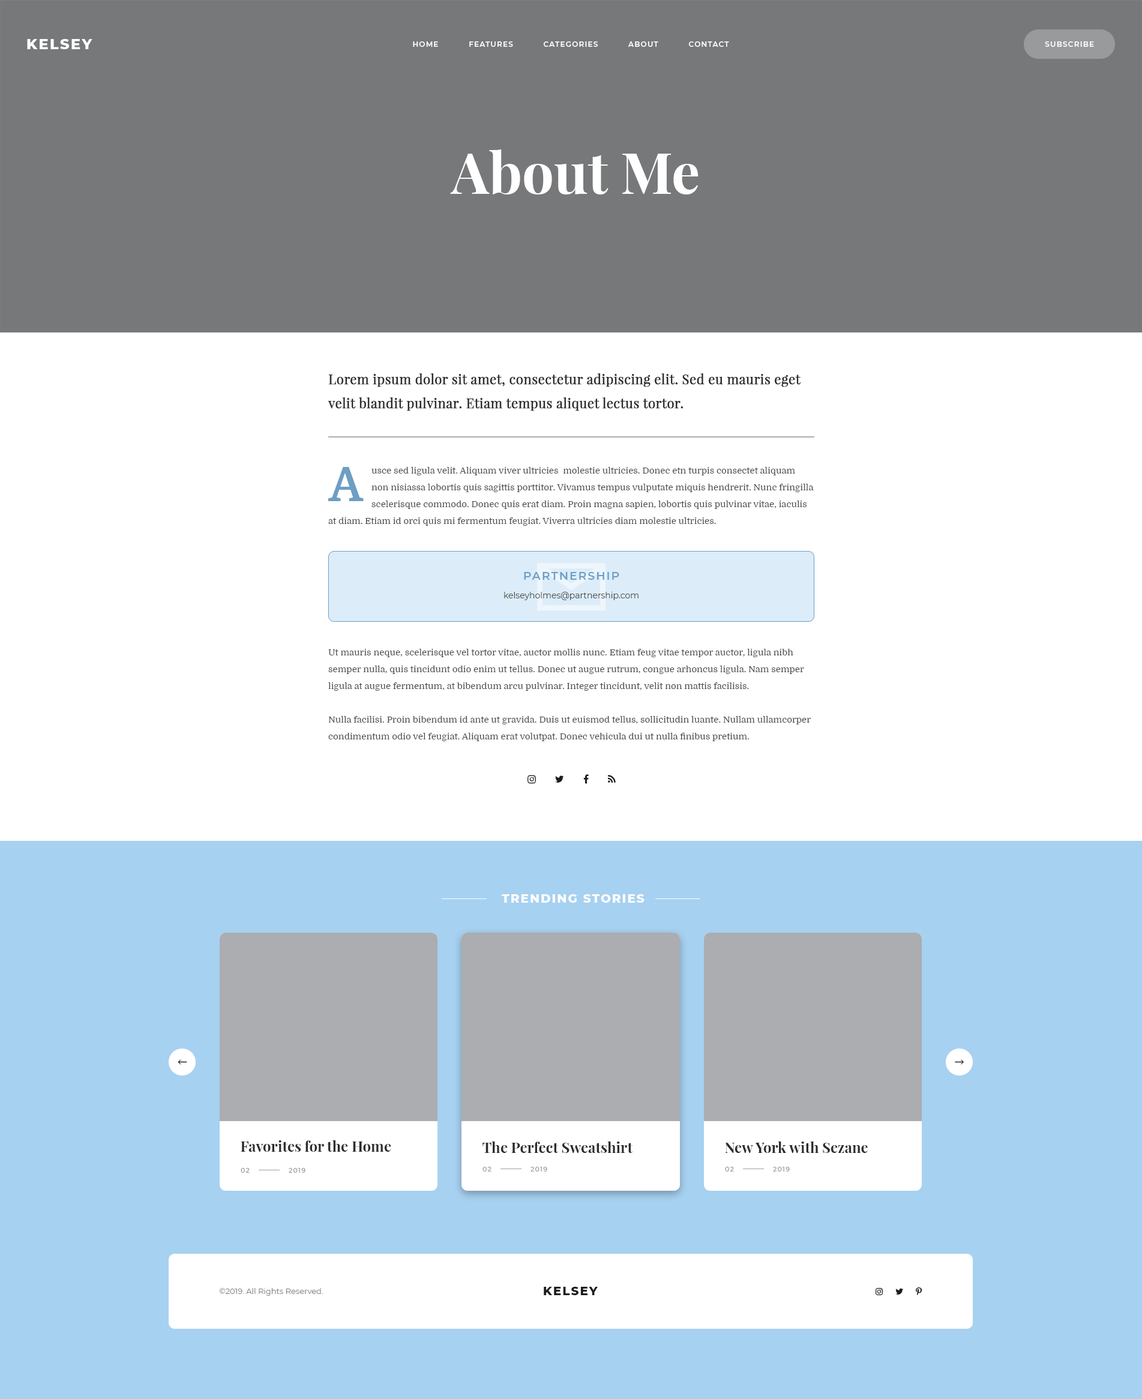
<style>
.page{position:relative;width:1142px;height:1399px;background:#ffffff}
.page>*{position:absolute;margin:0}
.t1{font:14.4px "Montserrat-ExtraBold";letter-spacing:0.1em;color:#ffffff;text-transform:uppercase}
.t2{font:7.2px "Montserrat-SemiBold";letter-spacing:0.1em;color:#ffffff;text-transform:uppercase}
.t3{font:56.4px "PlayfairDisplay-Bold";color:#ffffff}
.t4{font:13.2px/24px "PlayfairDisplay-Regular";color:#2b2d2e;font-weight:bold}
.t5{font:46.8px "Domine-Bold";color:#6d9ec4}
.t6{font:9px/16.8px "Domine-Regular";color:#4a4c4f}
.t7{font:9px "Domine-Regular";color:#4a4c4f}
.t8{font:11.4px "Montserrat-SemiBold";letter-spacing:0.1em;color:#6d9ec4;text-transform:uppercase}
.t9{font:8.4px "Montserrat-Regular";color:#4a4c4f}
.t10{font:12px "Montserrat-ExtraBold";letter-spacing:0.1em;color:#ffffff;text-transform:uppercase}
.t11{font:14.4px "PlayfairDisplay-Bold";color:#2b2d2e}
.t12{font:6.6px "Montserrat-SemiBold";letter-spacing:0.1em;color:#9fa1a4;text-transform:uppercase}
.t13{font:7.8px "Montserrat-Regular";color:#828384}
.t14{font:12px "Montserrat-ExtraBold";letter-spacing:0.1em;color:#1c1d1e;text-transform:uppercase}
</style>
<div class="page">
<p class="t1" style="left:27px;top:39px;width:65px;height:10px">Kelsey</p>
<p class="t2" style="left:413px;top:41px;width:316px;height:6px">Home           Features           Categories           About           Contact</p>
<p class="t2" style="left:1045px;top:41px;width:49px;height:6px">Subscribe</p>
<p class="t3" style="left:450px;top:149px;width:248px;height:45px">About Me</p>
<p class="t4" style="left:328px;top:373px;width:473px;height:38px">Lorem ipsum dolor sit amet, consectetur adipiscing elit. Sed eu mauris eget velit blandit pulvinar. Etiam tempus aliquet lectus tortor.</p>
<p class="t5" style="left:328px;top:467px;width:36px;height:34px">A</p>
<p class="t6" style="left:371px;top:467px;width:443px;height:42px">usce sed ligula velit. Aliquam viver ultricies  molestie ultricies. Donec etn turpis consectet aliquam non nisiassa lobortis quis sagittis porttitor. Vivamus tempus vulputate miquis hendrerit. Nunc fringilla scelerisque commodo. Donec quis erat diam. Proin magna sapien, lobortis quis pulvinar vitae, iaculis at diam. Etiam id orci quis mi fermentum feugiat.</p>
<p class="t7" style="left:328px;top:517px;width:388px;height:9px">at diam. Etiam id orci quis mi fermentum feugiat. Viverra ultricies diam molestie ultricies.</p>
<p class="t8" style="left:524px;top:572px;width:95px;height:8px">Partnership</p>
<p class="t9" style="left:504px;top:592px;width:134px;height:8px">kelseyholmes@partnership.com</p>
<p class="t6" style="left:328px;top:649px;width:483px;height:92px">Ut mauris neque, scelerisque vel tortor vitae, auctor mollis nunc. Etiam feug vitae tempor auctor, ligula nibh semper nulla, quis tincidunt odio enim ut tellus. Donec ut augue rutrum, congue arhoncus ligula. Nam semper ligula at augue fermentum, at bibendum arcu pulvinar. Integer tincidunt, velit non mattis facilisis.<br><br>Nulla facilisi. Proin bibendum id ante ut gravida. Duis ut euismod tellus, sollicitudin luante. Nullam ullamcorper condimentum odio vel feugiat. Aliquam erat volutpat. Donec vehicula dui ut nulla finibus pretium.</p>
<p class="t10" style="left:502px;top:894px;width:142px;height:8px">Trending Stories</p>
<p class="t11" style="left:241px;top:1139px;width:150px;height:12px">Favorites for the Home</p>
<p class="t11" style="left:482px;top:1141px;width:150px;height:12px">The Perfect Sweatshirt</p>
<p class="t11" style="left:725px;top:1141px;width:143px;height:12px">New York with Sezane</p>
<p class="t12" style="left:241px;top:1168px;width:9px;height:4px">02</p>
<p class="t12" style="left:289px;top:1168px;width:16px;height:4px">2019</p>
<p class="t12" style="left:482px;top:1166px;width:9px;height:5px">02</p>
<p class="t12" style="left:530px;top:1166px;width:17px;height:5px">2019</p>
<p class="t12" style="left:725px;top:1166px;width:9px;height:5px">02</p>
<p class="t12" style="left:773px;top:1166px;width:17px;height:5px">2019</p>
<p class="t13" style="left:219px;top:1288px;width:104px;height:7px">©2019. All Rights Reserved.</p>
<p class="t14" style="left:544px;top:1286px;width:54px;height:9px">Kelsey</p>
</div>
